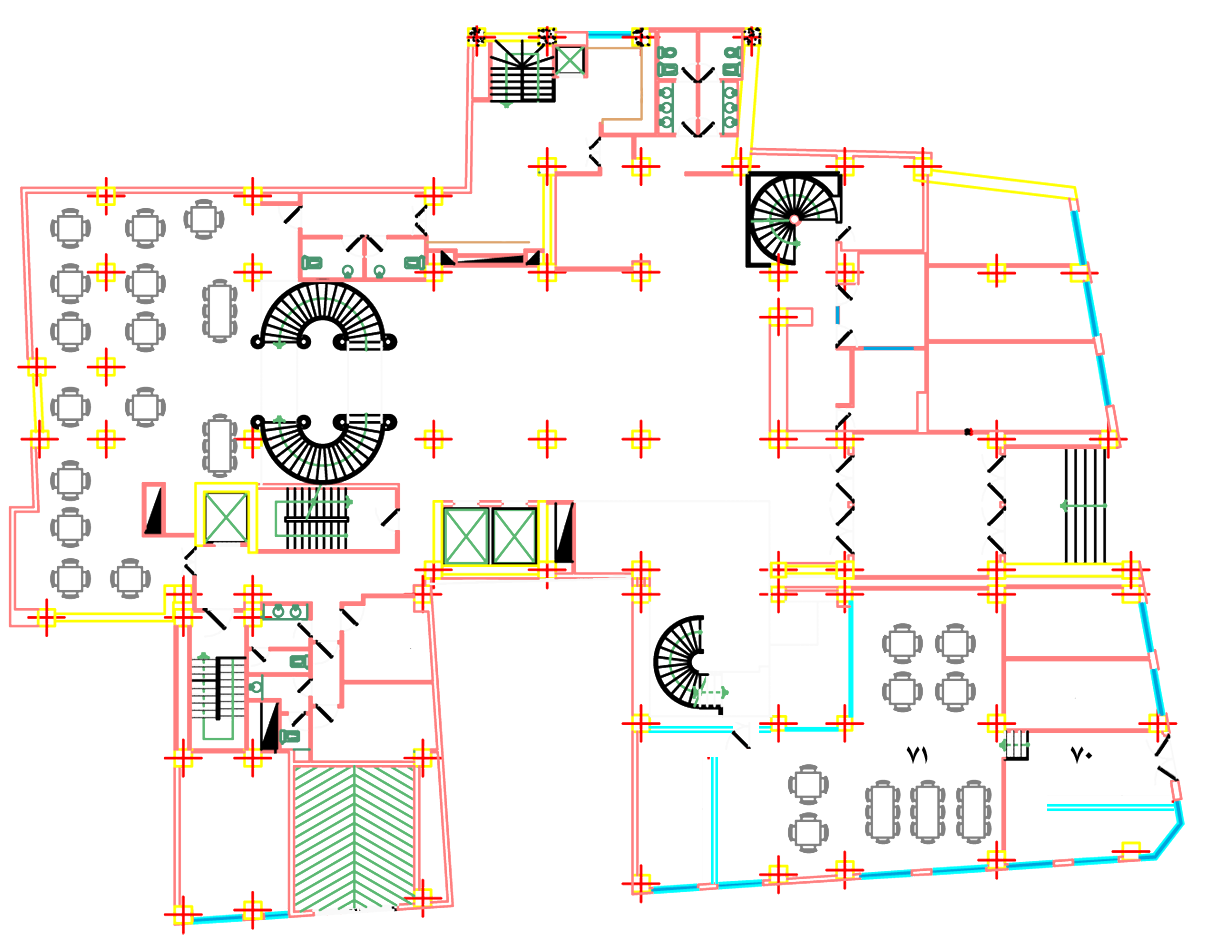
<style>
.page{position:relative;width:1214px;height:947px;background:#ffffff}
.page>*{position:absolute;margin:0}
.t1{font:33.3px "BKourosh";color:#000000}
</style>
<div class="page">
<p class="t1" style="left:906px;top:746px;width:22px;height:18px">71</p>
<p class="t1" style="left:1070px;top:746px;width:23px;height:18px">70</p>
</div>
